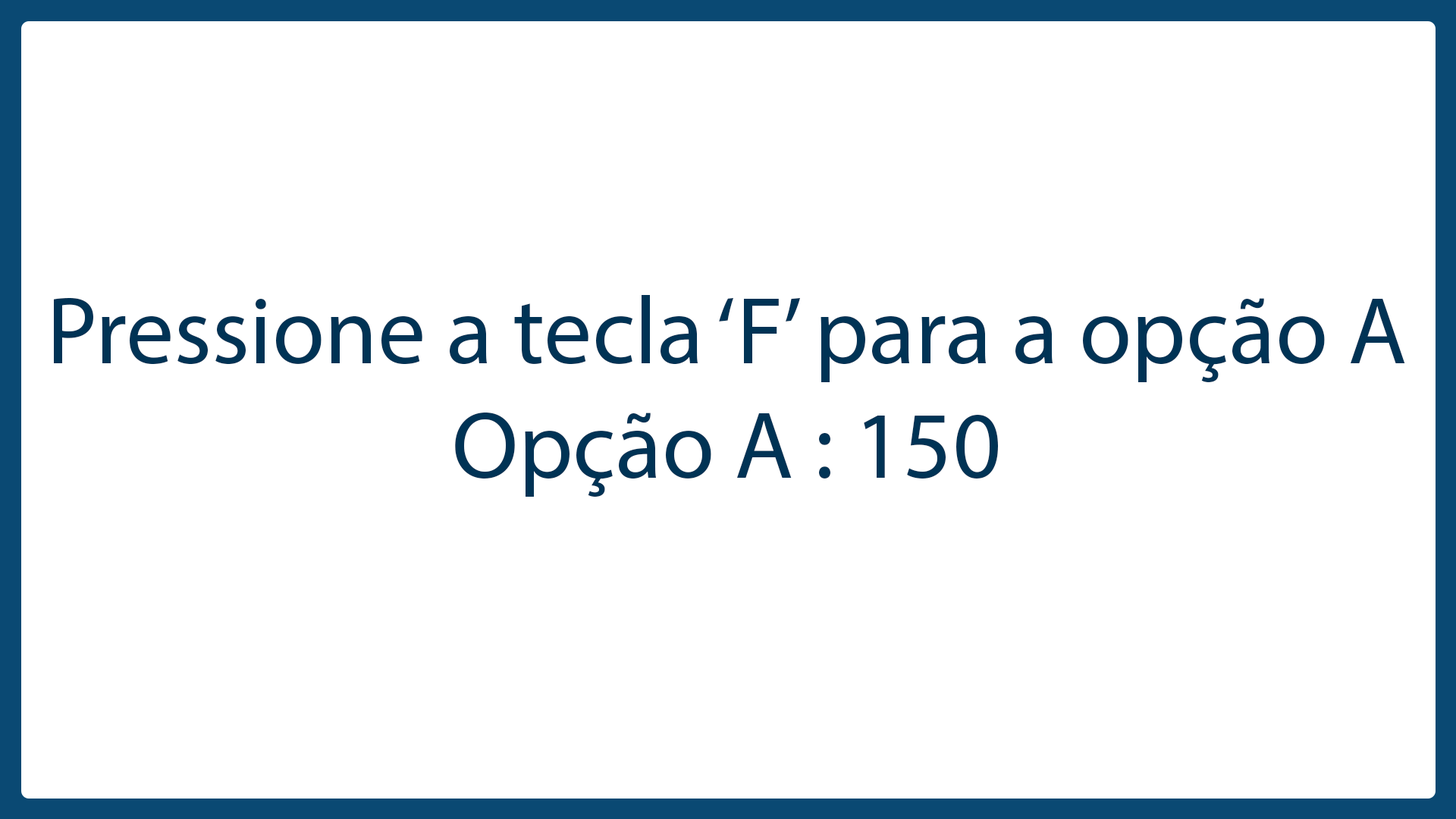
<style>
.page{position:relative;width:1456px;height:819px;background:#ffffff}
.page>*{position:absolute;margin:0}
.t1{font:95.9px "MyriadPro-Regular";color:#003355}
</style>
<div class="page">
<p class="t1" style="left:54px;top:295px;width:1351px;height:202px">Pressione a tecla ‘F’ para a opção A<br>                    Opção A : 150</p>
</div>
